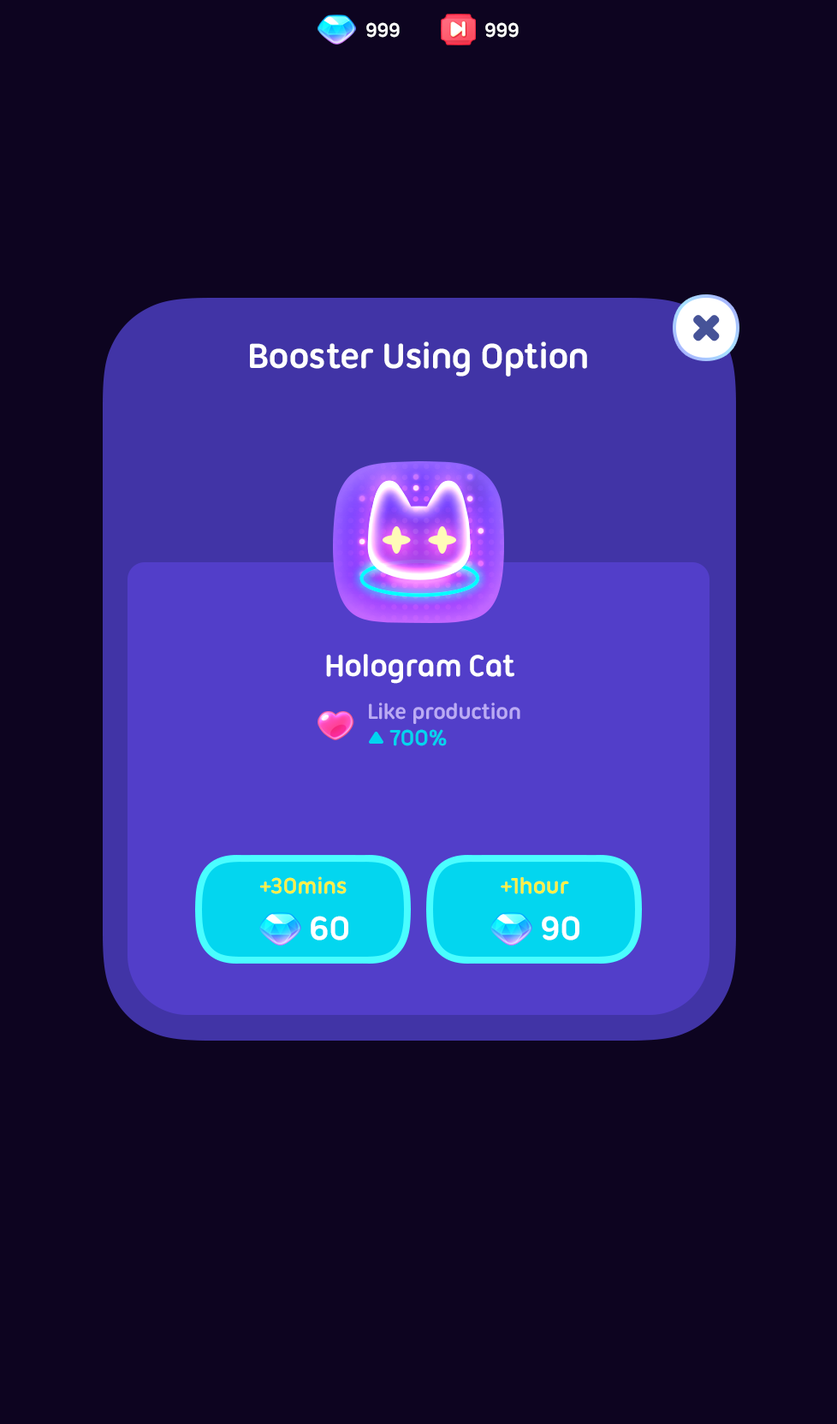
<style>
.page{position:relative;width:837px;height:1424px;background:#0d0420}
.page>*{position:absolute;margin:0}
.t1{font:21.4px "UbuntuTitling-Bold";letter-spacing:-0.025em;color:#ffffff}
.t2{font:37.7px "UbuntuTitling-Bold";letter-spacing:-0.025em;color:#ffffff}
.t3{font:32.5px "UbuntuTitling-Bold";letter-spacing:-0.025em;color:#ffffff}
.t4{font:23.1px "UbuntuTitling-Bold";letter-spacing:-0.025em;color:#bbabf4}
.t5{font:24px "UbuntuTitling-Bold";letter-spacing:-0.025em;color:#00d5ef}
.t6{font:24px "UbuntuTitling-Bold";letter-spacing:-0.025em;color:#fff045}
.t7{font:36px "UbuntuTitling-Bold";letter-spacing:-0.025em;color:#ffffff}
</style>
<div class="page">
<p class="t1" style="left:366px;top:22px;width:34px;height:16px">999</p>
<p class="t1" style="left:485px;top:22px;width:34px;height:16px">999</p>
<p class="t2" style="left:250px;top:342px;width:337px;height:35px">Booster Using Option</p>
<p class="t3" style="left:326px;top:654px;width:188px;height:30px">Hologram Cat</p>
<p class="t4" style="left:369px;top:703px;width:151px;height:21px">Like production</p>
<p class="t5" style="left:389px;top:729px;width:58px;height:17px">700%</p>
<p class="t6" style="left:260px;top:877px;width:87px;height:18px">+30mins</p>
<p class="t6" style="left:501px;top:877px;width:68px;height:18px">+1hour</p>
<p class="t7" style="left:311px;top:916px;width:37px;height:25px">60</p>
<p class="t7" style="left:542px;top:916px;width:38px;height:25px">90</p>
</div>
